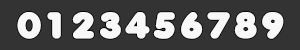
<style>
.page{position:relative;width:300px;height:50px;background:#333333}
.page>*{position:absolute;margin:0}
.t1{font:36px "Debussy";letter-spacing:0.075em;color:#f8f8f8}
</style>
<div class="page">
<p class="t1" style="left:17px;top:12px;width:267px;height:27px">0123456789</p>
</div>
